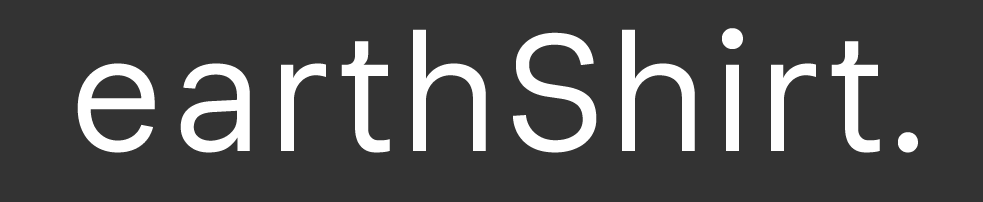
<style>
.page{position:relative;width:983px;height:202px;background:#333333}
.page>*{position:absolute;margin:0}
.t1{font:166.7px "KlarnaText-Regular";letter-spacing:0.025em;color:#ffffff}
</style>
<div class="page">
<p class="t1" style="left:77px;top:28px;width:841px;height:125px">earthShirt.</p>
</div>
